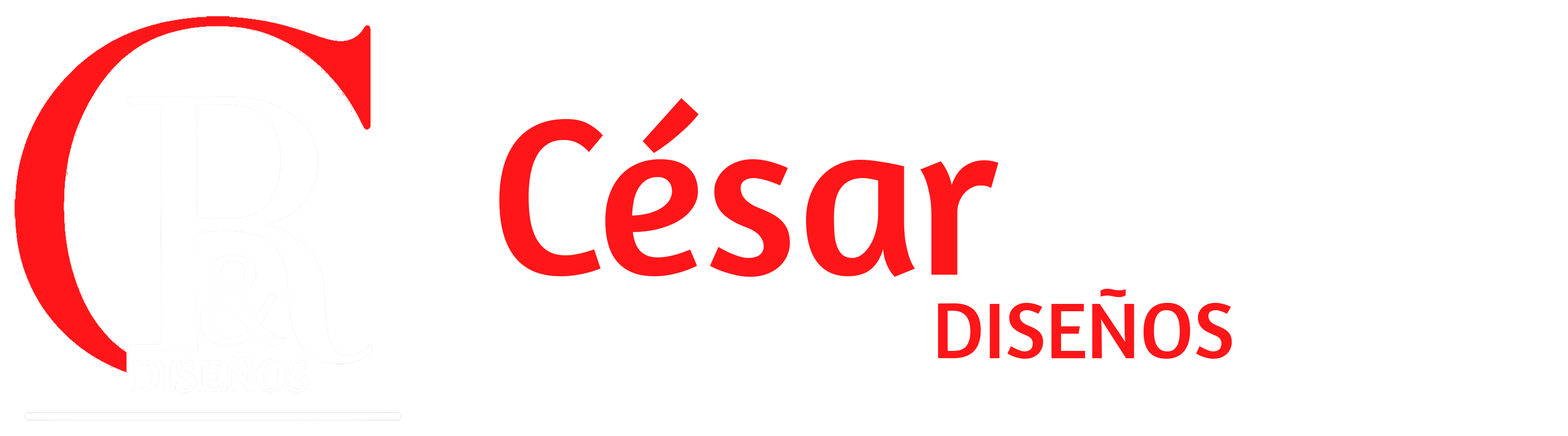
<style>
.page{position:relative;width:1568px;height:436px;background:#ffffff}
.page>*{position:absolute;margin:0}
.t1{font:226.8px "Amaranth-Regular";color:#fe1619}
.t2{font:226.8px "Amaranth-Regular";color:#ffffff}
.t3{font:80.4px "Amaranth-Regular";color:#fe1619}
.t4{font:80.4px "Amaranth-Regular";color:#ffffff}
</style>
<div class="page">
<p class="t1" style="left:499px;top:98px;width:1044px;height:226px">César<span class="t2">Reyes</span></p>
<p class="t3" style="left:868px;top:289px;width:364px;height:70px"><span class="t4">&amp;</span> DISEÑOS</p>
</div>
